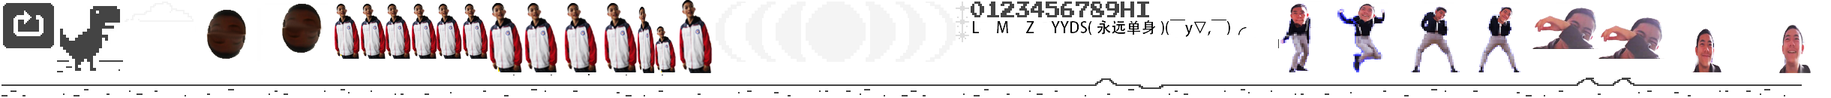
<style>
.page{position:relative;width:1831px;height:98px;background:#ffffff}
.page>*{position:absolute;margin:0}
.t1{font:9px "AdobeHeitiStd-Regular";color:#000000}
</style>
<div class="page">
<p class="t1" style="left:972px;top:20px;width:274px;height:17px">L     M     Z     YYDS(永远单身)(￣y▽,￣)╭</p>
</div>
